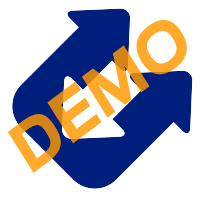
<style>
.page{position:relative;width:200px;height:200px;background:#ffffff}
.page>*{position:absolute;margin:0}
.t1{font:64.7px "Antenna-Bold";color:#ffaa2b;scale:0.97 1}
</style>
<div class="page">
<p class="t1" style="left:8px;top:20px;width:179px;height:153px;rotate:-37deg">DEMO</p>
</div>
